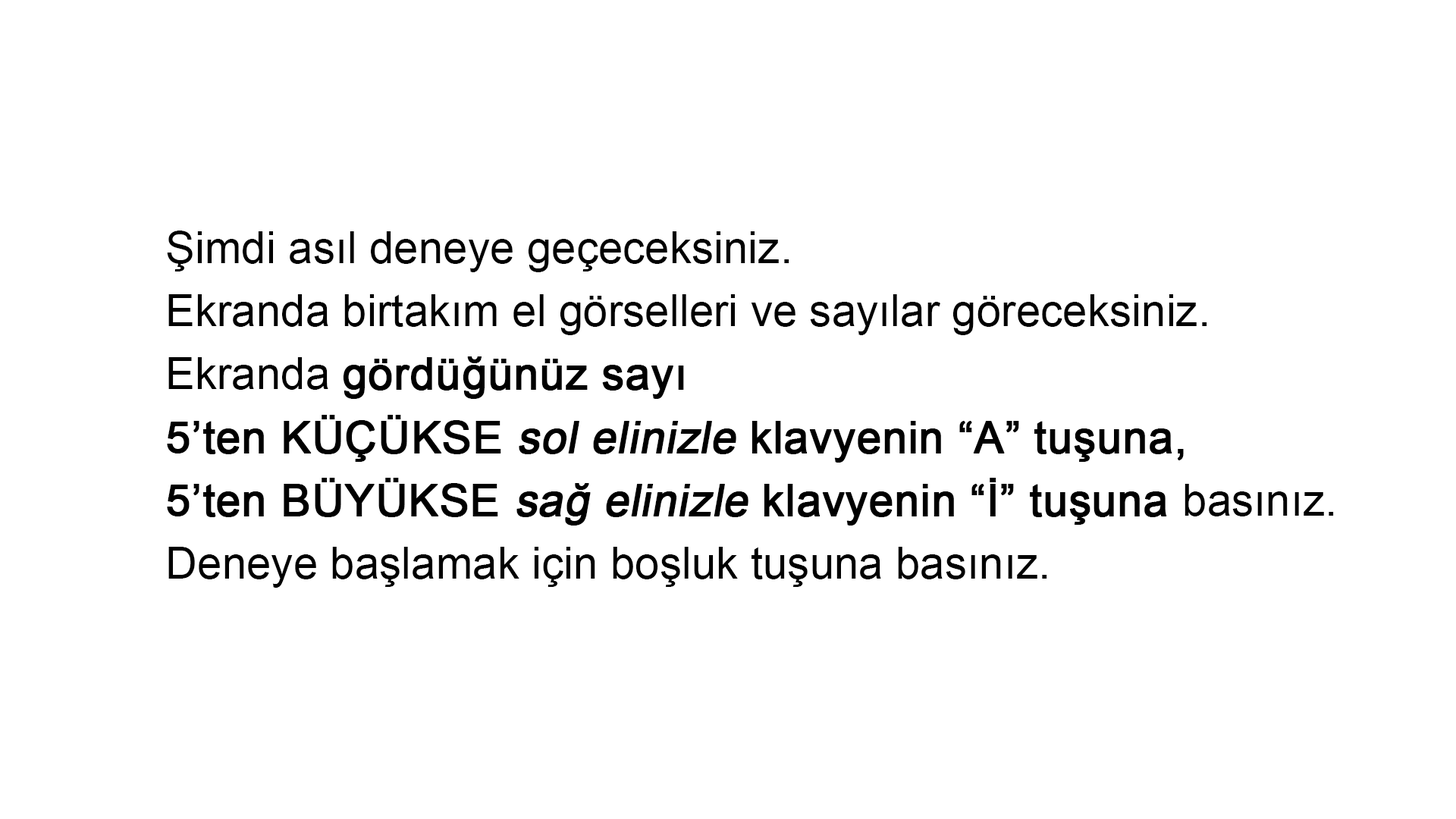
<style>
.page{position:relative;width:1456px;height:819px;background:#ffffff}
.page>*{position:absolute;margin:0}
.t1{font:44.2px/63.2px "ArialMT";color:#000000}
.t2{font:44.2px/63.2px "ArialMT";color:#000000;font-weight:bold}
.t3{font:44.2px/63.2px "ArialMT";color:#000000;font-weight:bold;font-style:italic}
</style>
<div class="page">
<p class="t1" style="left:167px;top:231px;width:1167px;height:357px">Şimdi asıl deneye geçeceksiniz.<br>Ekranda birtakım el görselleri ve sayılar göreceksiniz.<br>Ekranda <span class="t2">gördüğünüz sayı <br>5’ten KÜÇÜKSE </span><span class="t3">sol elinizle </span><span class="t2">klavyenin “A” tuşuna,<br>5’ten BÜYÜKSE </span><span class="t3">sağ elinizle </span><span class="t2">klavyenin “İ” tuşuna </span>basınız.<br>Deneye başlamak için boşluk tuşuna basınız.</p>
</div>
